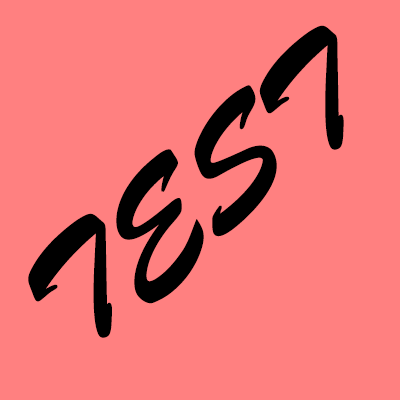
<style>
.page{position:relative;width:400px;height:400px;background:#ff8080}
.page>*{position:absolute;margin:0}
.t1{font:150.9px "BrushScriptStd";color:#000000;scale:0.95 1}
</style>
<div class="page">
<p class="t1" style="left:28px;top:25px;width:316px;height:313px;rotate:-39deg">TEST</p>
</div>
